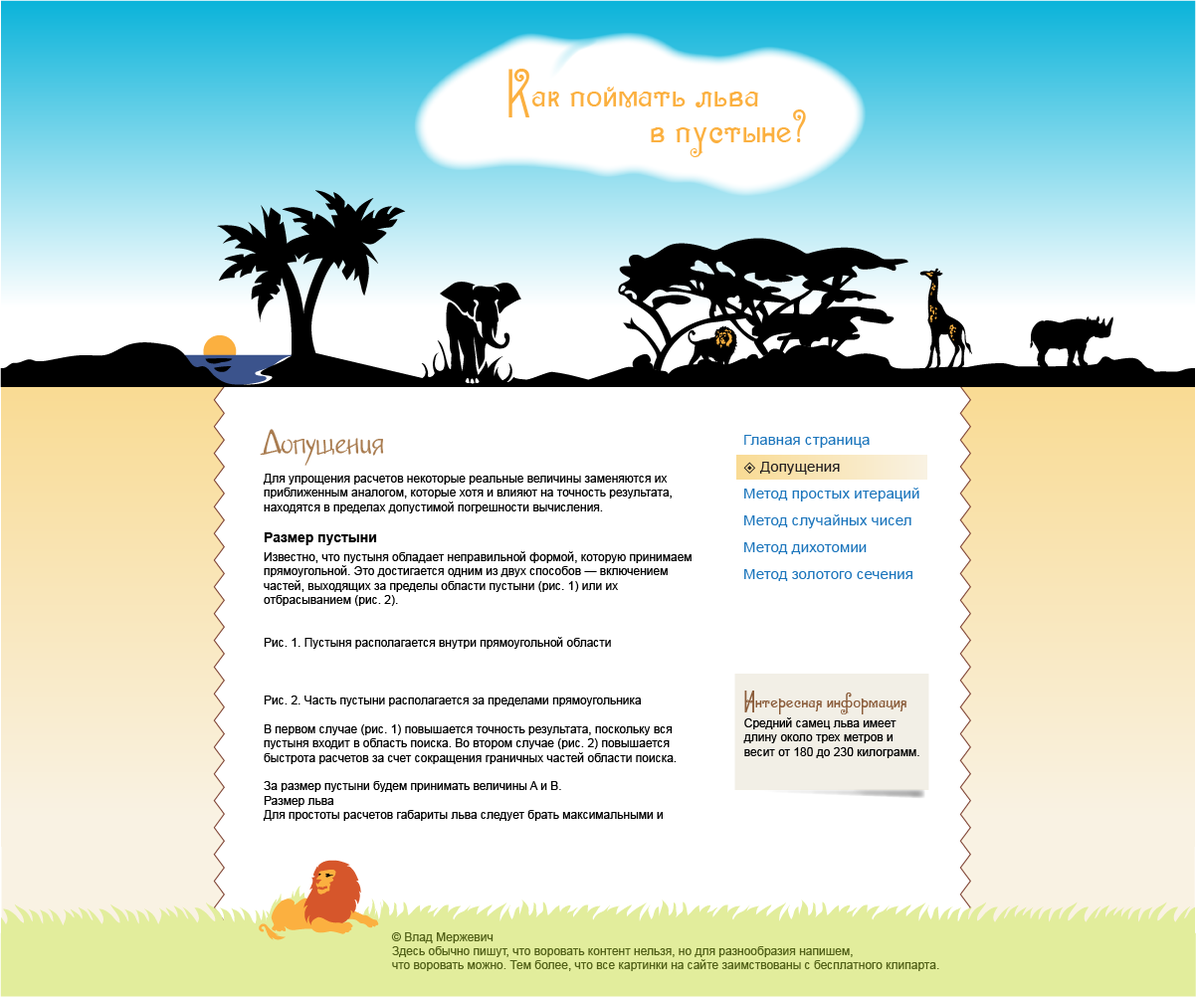
<style>
.page{position:relative;width:1196px;height:997px;background:#ffffff}
.page>*{position:absolute;margin:0}
.t1{font:59.8px "SevillaDecor";color:#fbb040}
.t2{font:11.9px "ArialMT";color:#000000}
.t3{font:27.9px "JakobCTT-Regular";color:#a97c50}
.t4{font:13.9px "Arial-BoldMT";color:#000000}
.t5{font:11.9px/18.9px "ArialMT";color:#000000}
.t6{font:14.1px/26.9px "ArialMT";color:#1b75bc;scale:1.07 1}
.t7{font:14.1px/26.9px "ArialMT";color:#231f20;scale:1.07 1}
.t8{font:27.9px "SevillaDecor";color:#8b5d3b}
.t9{font:11.9px "ArialMT";color:#526118}
</style>
<div class="page">
<p class="t1" style="left:508px;top:69px;width:251px;height:48px">Как поймать льва</p>
<p class="t1" style="left:651px;top:109px;width:155px;height:48px">в пустыне?</p>
<p class="t2" style="left:260px;top:429px;width:432px;height:392px"><span class="t3">Допущения<br></span><br>Для упрощения расчетов некоторые реальные величины заменяются их приближенным аналогом, которые хотя и влияют на точность результата, находятся в пределах допустимой погрешности вычисления. <br><br><span class="t4">Размер пустыни<br></span>Известно, что пусты<span class="t5">ня обл</span>адает неправильной формой, которую принимаем прямоугольной. Это достигается одним из двух способов — включением частей, выходящих за пределы области пустыни (рис. 1) или их отбрасыванием (рис. 2).<br> <br><br>Рис. 1. Пустыня располагается внутри прямоугольной области<br><br> <br><br>Рис. 2. Часть пустыни располагается за пределами прямоугольника<br><br>В первом случае (рис. 1) повышается точность результата, поскольку вся пустыня входит в область поиска. Во втором случае (рис. 2) повышается быстрота расчетов за счет сокращения граничных частей области поиска.<br><br>За размер пустыни будем принимать величины A и B.<br>Размер льва<br>Для простоты расчетов габариты льва следует брать максимальными и включать в них хвост с кисточкой, гриву и даже усы (рис. 3). Чем больше размеры льва, тем на меньшее количество  дискретных областей придется разделить пустыню. С другой стороны уменьшение габаритов повышает точность поиска льва (рис. 4).<br> <br><br>Рис. 3. Максимальные размеры льва для быстрого поиска<br><br> <br><br>Рис. 4. Минимальные размеры льва для точного поиска<br><br>За размеры льва будем принимать величины W, H, L, где W — ширина льва, H — его высота, а L — длина.<br>Размер клетки<br>Задача поимки льва сводится к помещению животного в клетку. Гипотетически можно выполнить клетку размером с пустыню, опустить ее сверху и решить поставленную задачу. Однако создать клетку подобных размеров не представляется возможным, поэтому мы должны исходить из реальных факторов и делать клетку, несколько превышающей размерами льва (рис. 5). <br><br> <br>Рис. 5. Размеры клетки<br><br>Желательно, чтобы ширина и длина клетки были кратные значениям A и B. Таким образом, всю пустыню можно поделить на ряд дискретных областей, размеры которых совпадают с размерами нашей клетки.<br>Положение льва<br>Во всех случаях положение льва считается стационарным. Во время поиска животное остается на своем месте и не перемещается до его поимки в клетку.</p>
<p class="t6" style="left:744px;top:435px;width:175px;height:146px">Главная страница<br>    <span class="t7">Допущения<br></span>Метод простых итераций<br>Метод случайных чисел<br>Метод дихотомии<br>Метод золотого сечения</p>
<p class="t2" style="left:743px;top:691px;width:176px;height:67px"><span class="t8">Интересная информация<br></span>Средний самец льва имеет длину около трех метров и весит от 180 до 230 килограмм.</p>
<p class="t9" style="left:391px;top:932px;width:548px;height:39px">© Влад Мержевич<br>Здесь обычно пишут, что воровать контент нельзя, но для разнообразия напишем, <br>что воровать можно. Тем более, что все картинки на сайте заимствованы с бесплатного клипарта.</p>
</div>
